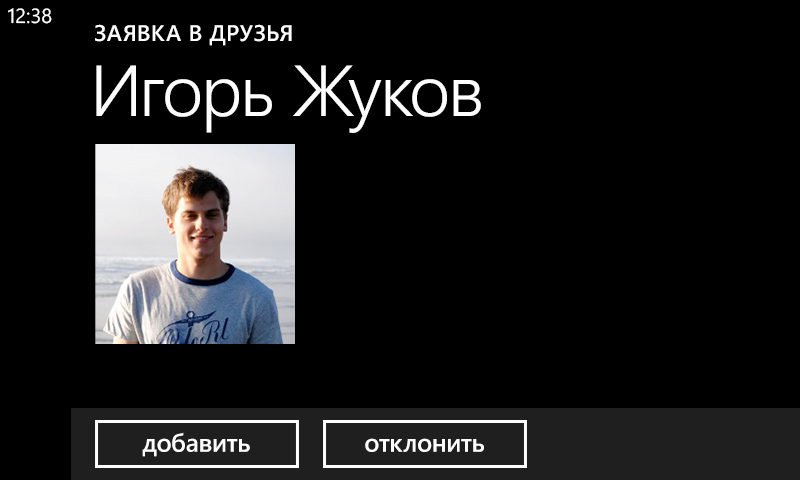
<style>
.page{position:relative;width:800px;height:480px;background:#000000}
.page>*{position:absolute;margin:0}
.t1{font:20.4px "SegoeWP";color:#ffffff}
.t2{font:22.7px "SegoeWP-Semibold";letter-spacing:0.025em;color:#ffffff;text-transform:uppercase}
.t3{font:72px "SegoeWP-SemiLight";letter-spacing:-0.01em;color:#ffffff}
.t4{font:25.3px "SegoeWP-Semibold";letter-spacing:-0.01em;color:#ffffff}
</style>
<div class="page">
<p class="t1" style="left:8px;top:8px;width:44px;height:16px">12:38</p>
<p class="t2" style="left:95px;top:24px;width:197px;height:22px">Заявка в друзья</p>
<p class="t3" style="left:96px;top:65px;width:385px;height:68px">Игорь Жуков</p>
<p class="t4" style="left:142px;top:432px;width:108px;height:25px">добавить</p>
<p class="t4" style="left:365px;top:438px;width:119px;height:14px">отклонить</p>
</div>
